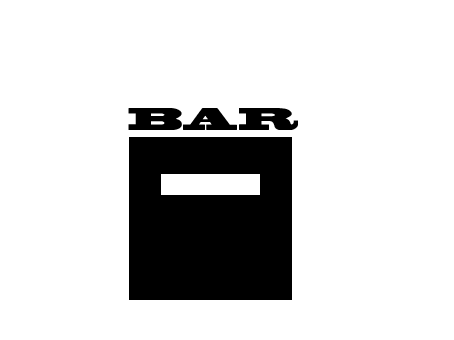
<style>
.page{position:relative;width:454px;height:340px;background:#ffffff}
.page>*{position:absolute;margin:0}
.t1{font:30px "BlackoakStd";color:#000000}
</style>
<div class="page">
<p class="t1" style="left:128px;top:108px;width:170px;height:22px">BAR</p>
</div>
